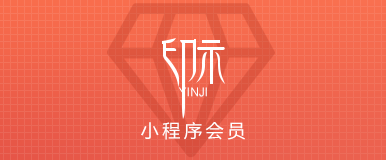
<style>
.page{position:relative;width:386px;height:160px}
.page>*{position:absolute;margin:0}
.t1{font:12px "ArialMT";color:#ffffff}
.t2{font:18px "MicrosoftYaHei";letter-spacing:0.2em;color:#ffffff}
</style>
<div class="page">
<p class="t1" style="left:178px;top:87px;width:29px;height:10px">YINJI</p>
<p class="t2" style="left:141px;top:122px;width:104px;height:18px">小程序会员</p>
</div>
